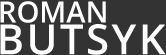
<style>
.page{position:relative;width:166px;height:55px;background:#333333}
.page>*{position:absolute;margin:0}
.t1{font:29.2px "OpenSans-SemiBold";color:#ffffff}
.t2{font:41.7px "OpenSans-SemiBold";letter-spacing:0.06em;color:#ffffff}
</style>
<div class="page">
<p class="t1" style="left:0px;top:1px;width:106px;height:22px">ROMAN</p>
<p class="t2" style="left:0px;top:24px;width:166px;height:31px">BUTSYK</p>
</div>
